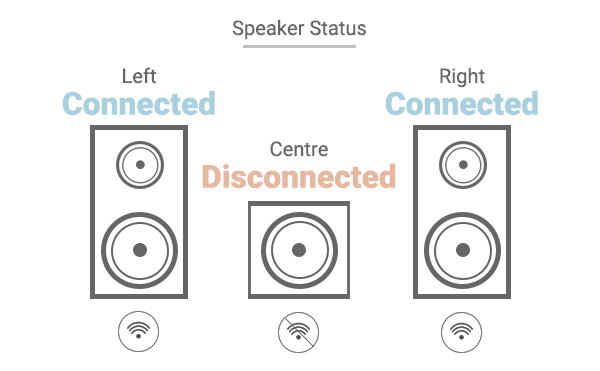
<style>
.page{position:relative;width:600px;height:371px;background:#ffffff}
.page>*{position:absolute;margin:0}
.t1{font:20.1px "Roboto-Regular";color:#666666}
.t2{font:31.8px/31.8px "Roboto-Black";color:#a9d0de}
.t3{font:20.1px/31.8px "Roboto-Regular";color:#666666}
.t4{font:31.8px/31.8px "Roboto-Black";color:#e6b8a0}
</style>
<div class="page">
<p class="t1" style="left:232px;top:19px;width:134px;height:21px">Speaker Status</p>
<p class="t2" style="left:62px;top:67px;width:153px;height:49px;text-align:center"><span class="t3">Left<br></span>Connected</p>
<p class="t2" style="left:385px;top:67px;width:153px;height:49px;text-align:center"><span class="t1">Right<br></span>Connected</p>
<p class="t4" style="left:202px;top:141px;width:194px;height:48px;text-align:center"><span class="t1">Centre<br></span>Disconnected</p>
</div>
